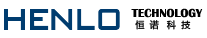
<style>
.page{position:relative;width:207px;height:38px;background:#ffffff}
.page>*{position:absolute;margin:0}
.t1{font:12px "BritannicBold";color:#000000}
.t2{font:9px "MicrosoftYaHei";color:#000000}
.t3{font:10px "MicrosoftYaHei";color:#000000}
</style>
<div class="page">
<p class="t1" style="left:131px;top:8px;width:72px;height:10px">TECHNOLOGY</p>
<p class="t2" style="left:135px;top:20px;width:56px;height:10px"><span class="t3"> </span>恒  诺   科  技</p>
</div>
